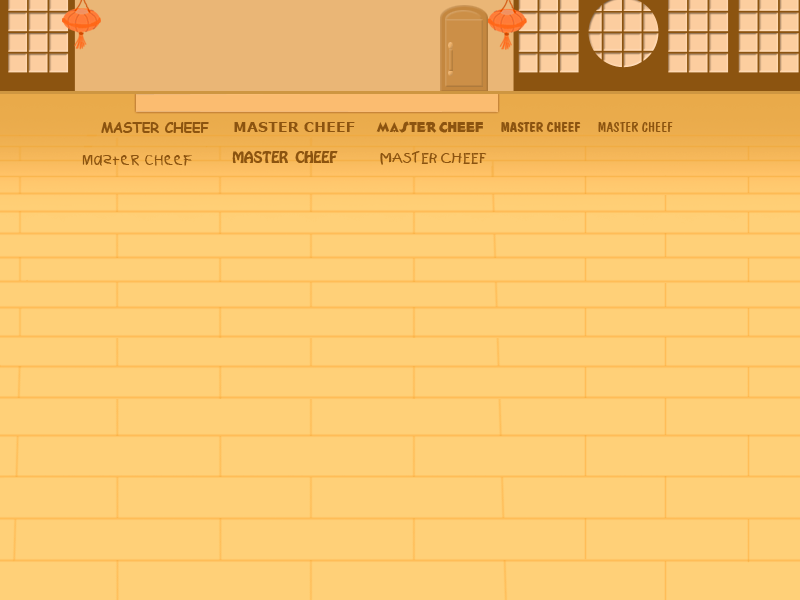
<style>
.page{position:relative;width:800px;height:600px;background:#ffd078}
.page>*{position:absolute;margin:0}
.t1{font:13.6px "ComicSansMS-Bold";color:#8c5410}
.t2{font:14.3px "Verdana-Bold";color:#8c5410}
.t3{font:14.3px "Bigshot";color:#8c5410}
.t4{font:14.3px "DomBoldBT-Regular";color:#8c5410}
.t5{font:14.3px "DomCasualBT-Regular";color:#8c5410}
.t6{font:14.3px "FirstGrader-Normal";color:#8c5410}
.t7{font:14.3px "HoboR";color:#8c5410}
.t8{font:14.3px "KidsPlain";color:#8c5410}
</style>
<div class="page">
<p class="t1" style="left:101px;top:122px;width:108px;height:11px">MASTER CHEEF</p>
<p class="t2" style="left:234px;top:122px;width:121px;height:10px">MASTER CHEEF</p>
<p class="t3" style="left:376px;top:121px;width:107px;height:12px">MASTER CHEEF</p>
<p class="t4" style="left:501px;top:122px;width:80px;height:10px">MASTER CHEEF</p>
<p class="t5" style="left:598px;top:122px;width:75px;height:10px">MASTER CHEEF</p>
<p class="t6" style="left:82px;top:155px;width:110px;height:11px">MASTER CHEEF</p>
<p class="t7" style="left:232px;top:151px;width:106px;height:13px">MASTER CHEEF</p>
<p class="t8" style="left:380px;top:151px;width:107px;height:14px">MASTER CHEEF</p>
</div>
